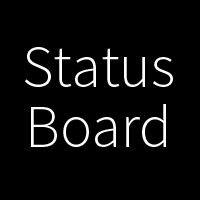
<style>
.page{position:relative;width:200px;height:200px;background:#000000}
.page>*{position:absolute;margin:0}
.t1{font:60px "SourceSansPro-Light";color:#ffffff}
</style>
<div class="page">
<p class="t1" style="left:25px;top:47px;width:148px;height:100px">Status Board</p>
</div>
